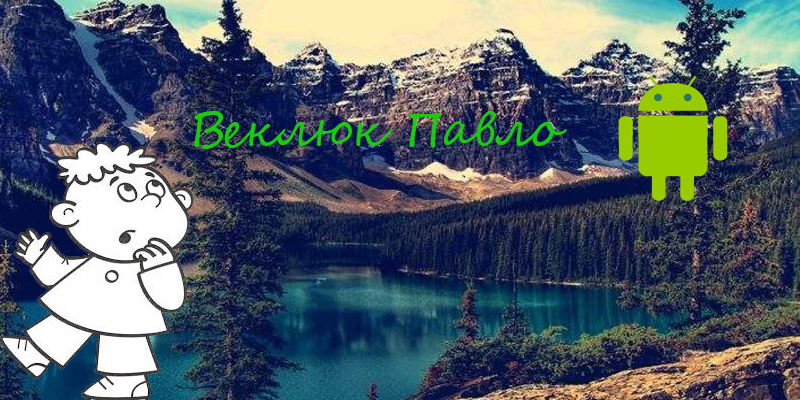
<style>
.page{position:relative;width:800px;height:400px}
.page>*{position:absolute;margin:0}
.t1{font:48px "SegoeScript";color:#18cc0a}
</style>
<div class="page">
<p class="t1" style="left:194px;top:111px;width:373px;height:38px">Веклюк Павло</p>
</div>
